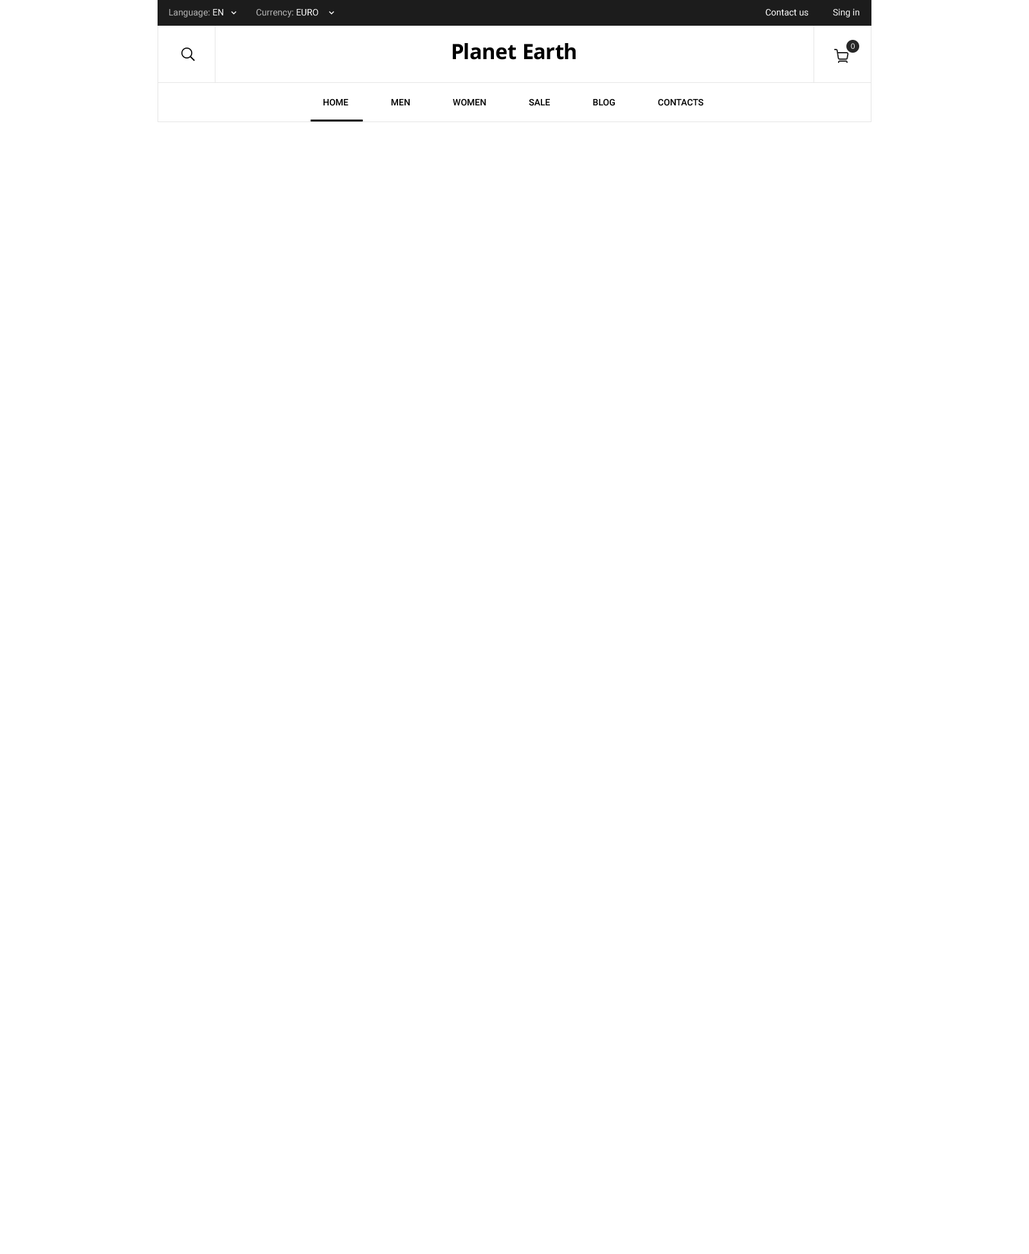
<style>
.page{position:relative;width:1029px;height:1254px;background:#ffffff}
.page>*{position:absolute;margin:0}
.t1{font:9px "Roboto-Regular";color:#b9b9b9}
.t2{font:9px "Roboto-Regular";color:#ffffff}
.t3{font:21.1px "OpenSans-Bold";color:#000000}
.t4{font:7.7px "OpenSans";color:#ffffff;text-transform:uppercase}
.t5{font:9px "Roboto-Medium";color:#000000;text-transform:uppercase}
</style>
<div class="page">
<p class="t1" style="left:169px;top:9px;width:54px;height:8px">Language: <span class="t2">EN</span></p>
<p class="t1" style="left:256px;top:9px;width:62px;height:8px">Currency: <span class="t2">EURO</span></p>
<p class="t2" style="left:765px;top:9px;width:43px;height:7px">Contact us</p>
<p class="t2" style="left:833px;top:8px;width:26px;height:9px">Sing in</p>
<p class="t3" style="left:453px;top:43px;width:122px;height:17px">Planet Earth</p>
<p class="t4" style="left:851px;top:43px;width:3px;height:6px">0</p>
<p class="t5" style="left:323px;top:99px;width:380px;height:7px">Home men women sale blog contacts</p>
</div>
